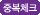
<style>
.page{position:relative;width:40px;height:15px;background:#692e8c}
.page>*{position:absolute;margin:0}
.t1{font:10px "YDIYGO120-KSCpc-EUC-H";letter-spacing:-0.05em;color:#ffffff;text-transform:uppercase;scale:0.9 1}
</style>
<div class="page">
<p class="t1" style="left:3px;top:3px;width:34px;height:10px">중복체크</p>
</div>
